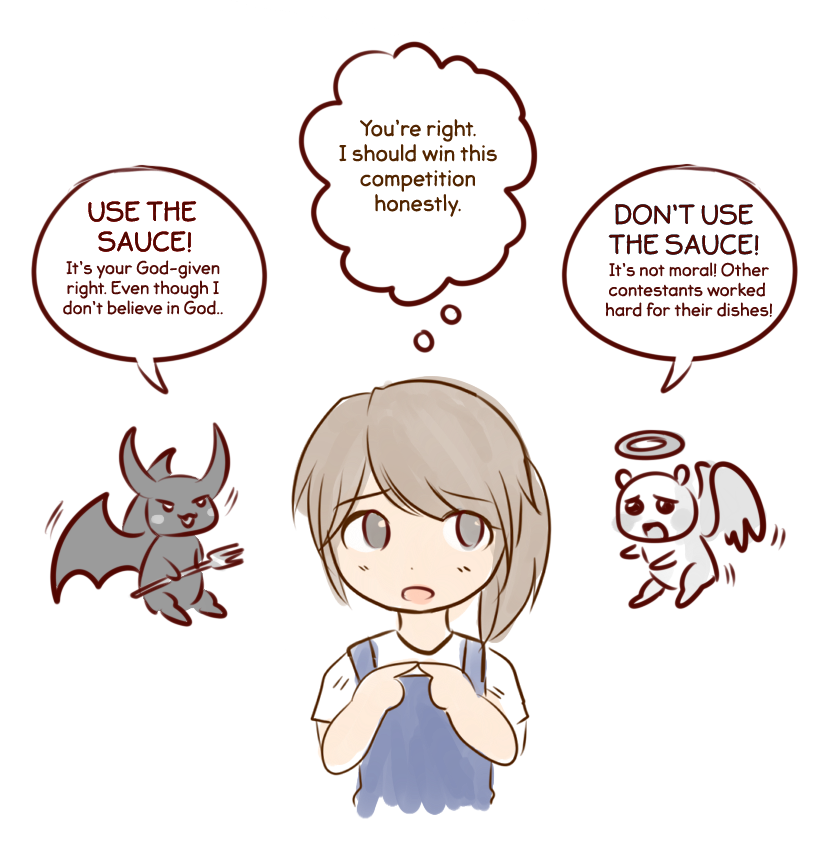
<style>
.page{position:relative;width:818px;height:854px;background:#ffffff}
.page>*{position:absolute;margin:0}
.t1{font:20.8px "JollyGoodSans-Basic";color:#522500}
.t2{font:25px "JollyGoodSans-Basic";color:#520802}
.t3{font:16.7px "JollyGoodSans-Basic";color:#530a05}
</style>
<div class="page">
<p class="t1" style="left:339px;top:119px;width:158px;height:98px;text-align:center">You’re right.<br>I should win this<br>competition<br>honestly.</p>
<p class="t2" style="left:88px;top:201px;width:109px;height:52px;text-align:center">USE THE <br>SAUCE!</p>
<p class="t2" style="left:88px;top:201px;width:109px;height:52px;text-align:center">USE THE <br>SAUCE!</p>
<p class="t2" style="left:608px;top:204px;width:151px;height:52px;text-align:center">DON’T USE<br>THE SAUCE!</p>
<p class="t2" style="left:608px;top:204px;width:151px;height:52px;text-align:center">DON’T USE<br>THE SAUCE!</p>
<p class="t3" style="left:63px;top:260px;width:160px;height:55px;text-align:center">It’s your God-given<br>right. Even though I<br>don’t believe in God..</p>
<p class="t3" style="left:606px;top:262px;width:166px;height:55px;text-align:center">It’s not moral! Other<br>contestants worked <br>hard for their dishes!</p>
</div>
